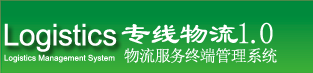
<style>
.page{position:relative;width:313px;height:73px}
.page>*{position:absolute;margin:0}
.t1{font:30px "ArialMT";color:#ffffff}
.t2{font:30px "LiSu";color:#ffffff}
.t3{font:8px "ArialMT";color:#ffffff}
.t4{font:16px "SimSun";color:#ffffff}
</style>
<div class="page">
<p class="t1" style="left:4px;top:23px;width:113px;height:29px">Logistics</p>
<p class="t2" style="left:121px;top:22px;width:152px;height:22px">专线物流1.0</p>
<p class="t3" style="left:4px;top:54px;width:111px;height:9px">Logistics Management System</p>
<p class="t4" style="left:124px;top:48px;width:153px;height:15px">物流服务终端管理系统</p>
</div>
